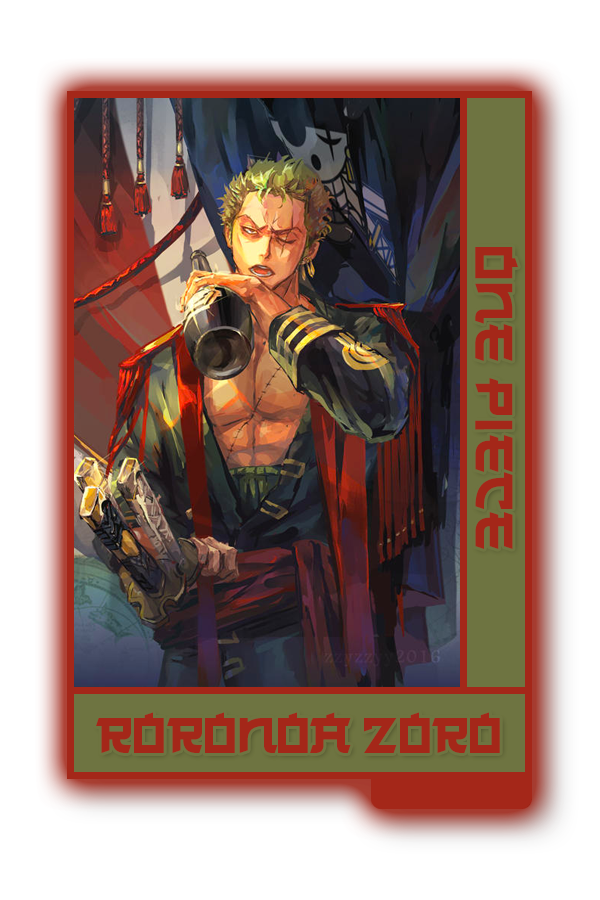
<style>
.page{position:relative;width:600px;height:900px;background:#ffffff}
.page>*{position:absolute;margin:0}
.t1{font:58.4px "Japanese2020";color:#9d382f}
.t2{font:55.4px "Japanese2020";color:#9d382f}
</style>
<div class="page">
<p class="t1" style="left:475px;top:247px;width:43px;height:302px;rotate:90deg">ONE PIECE</p>
<p class="t2" style="left:96px;top:712px;width:404px;height:41px">RORONOA ZORO</p>
</div>
